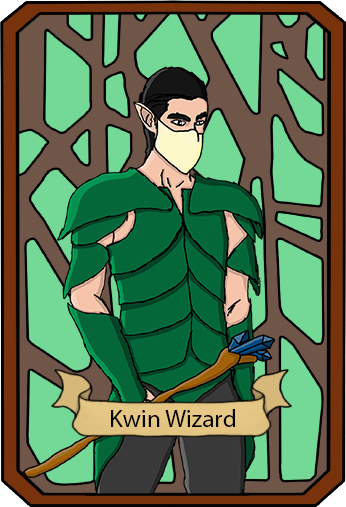
<style>
.page{position:relative;width:346px;height:507px;background:#74d997}
.page>*{position:absolute;margin:0}
.t1{font:25px "MyriadPro-Regular";color:#000000}
</style>
<div class="page">
<p class="t1" style="left:111px;top:409px;width:124px;height:18px">Kwin Wizard</p>
</div>
